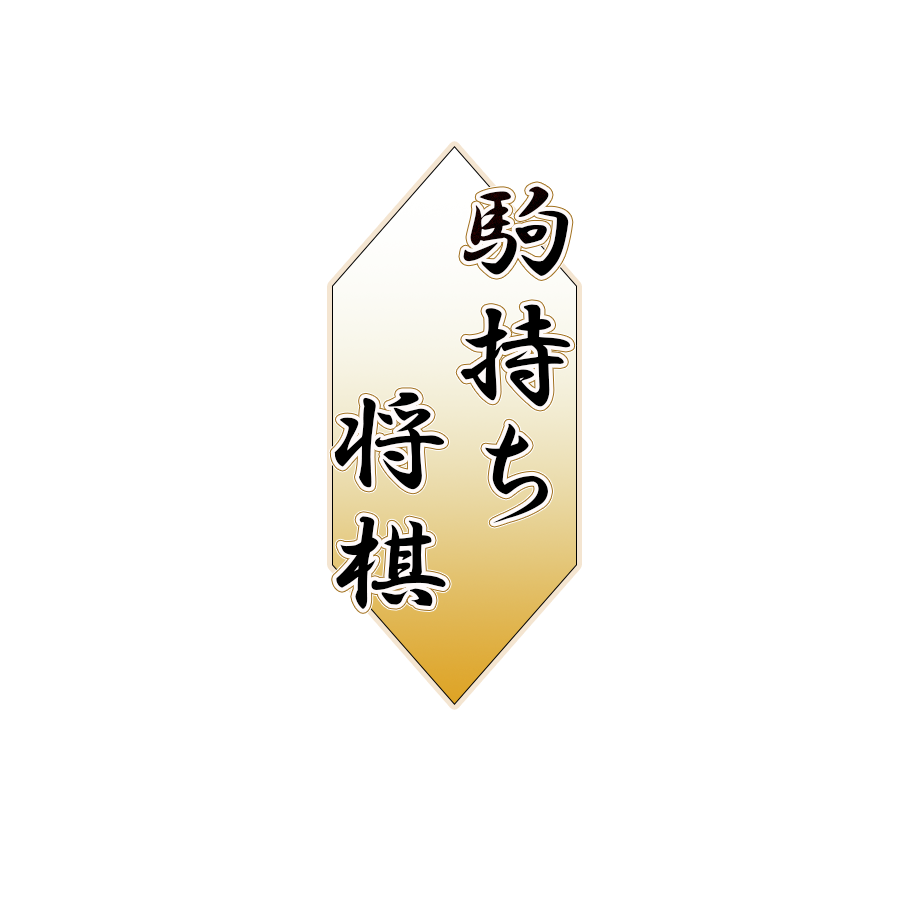
<style>
.page{position:relative;width:900px;height:900px;background:#ffffff}
.page>*{position:absolute;margin:0}
.t1{font:120.8px "HGSGyoshotai";color:#000000}
</style>
<div class="page">
<p class="t1" style="left:460px;top:186px;width:111px;height:337px">駒持ち<br><br><br>将棋</p>
<p class="t1" style="left:334px;top:392px;width:112px;height:217px">将棋<br>将棋</p>
</div>
